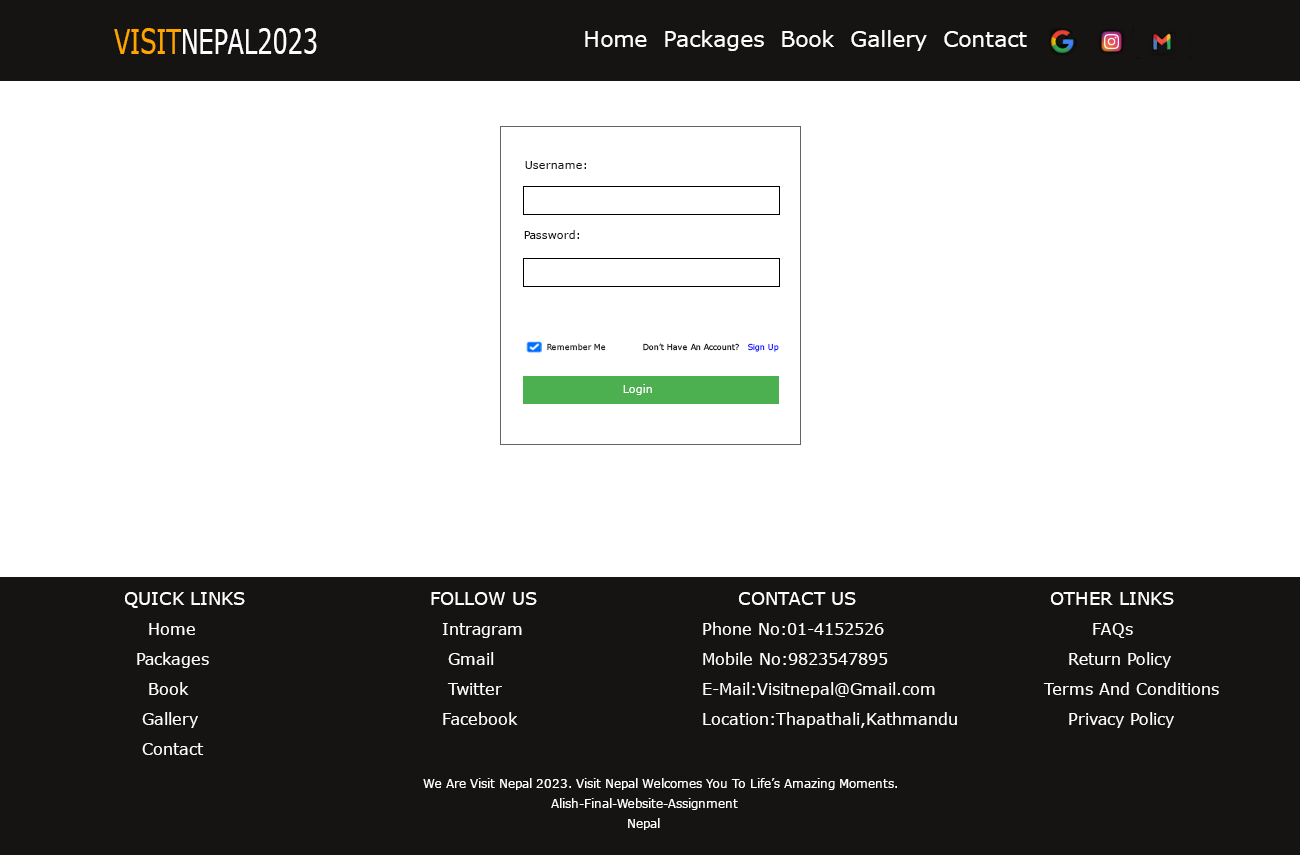
<style>
.page{position:relative;width:1300px;height:855px;background:#ffffff}
.page>*{position:absolute;margin:0}
.t1{font:34.3px "MSReferenceSansSerif";color:#ffffff;scale:0.69 1}
.t2{font:34.3px "MSReferenceSansSerif";color:#ffa500;scale:0.69 1}
.t3{font:22px "MSReferenceSansSerif";color:#ffffff}
.t4{font:11px "MSReferenceSansSerif";color:#161313}
.t5{font:8px "MSReferenceSansSerif"}
.t6{font:8px "MSReferenceSansSerif";color:#000000}
.t7{font:11px "MSReferenceSansSerif";color:#ffffff}
.t8{font:16px/30px "MSReferenceSansSerif";color:#ffffff}
.t9{font:18px/30px "MSReferenceSansSerif";color:#ffffff}
.t10{font:12px/20px "MSReferenceSansSerif";color:#ffffff}
</style>
<div class="page">
<p class="t1" style="left:114px;top:28px;width:203px;height:26px"><span class="t2">VISIT</span>NEPAL2023</p>
<p class="t3" style="left:585px;top:30px;width:442px;height:21px">Home  Packages  Book  Gallery  Contact</p>
<p class="t4" style="left:525px;top:161px;width:61px;height:8px">Username:</p>
<p class="t4" style="left:524px;top:230px;width:55px;height:9px">Password:</p>
<p class="t5" style="left:547px;top:343px;width:59px;height:8px">Remember Me</p>
<p class="t6" style="left:643px;top:343px;width:136px;height:9px">Don’t Have An Account?   Sign Up</p>
<p class="t7" style="left:623px;top:384px;width:29px;height:11px">Login</p>
<p class="t8" style="left:124px;top:592px;width:121px;height:163px"><span class="t9">QUICK LINKS <br>    </span>Home <br>  Packages<br>    Book<br>   Gallery<br>   Contact</p>
<p class="t8" style="left:431px;top:592px;width:106px;height:133px"><span class="t9">FOLLOW US <br>  </span>Intragram<br>   Gmail<br>   Twitter<br>  Facebook</p>
<p class="t8" style="left:703px;top:592px;width:254px;height:136px"><span class="t9">      CONTACT US <br></span>Phone No:01-4152526<br>Mobile No:9823547895<br>E-Mail:Visitnepal@Gmail.com<br>Location:Thapathali,Kathmandu</p>
<p class="t8" style="left:1043px;top:592px;width:176px;height:136px"><span class="t9">  OTHER LINKS <br></span>         FAQs<br>     Return Policy<br> Terms And Conditions<br>     Privacy Policy</p>
<p class="t10" style="left:423px;top:778px;width:474px;height:52px">We Are Visit Nepal 2023. Visit Nepal Welcomes You To Life’s Amazing Moments.<br>                                Alish-Final-Website-Assignment<br>                                                   Nepal</p>
</div>
